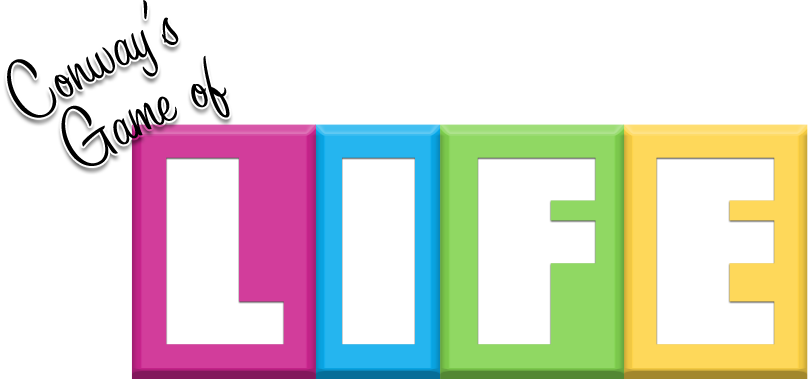
<style>
.page{position:relative;width:808px;height:379px;background:#ffffff}
.page>*{position:absolute;margin:0}
.t1{font:87px "SignPainter-HouseCasual";color:#000000}
.t2{font:229.5px "CompactaBT-Black";color:#ffffff}
</style>
<div class="page">
<p class="t1" style="left:7px;top:0px;width:172px;height:118px">Conway’s</p>
<p class="t1" style="left:61px;top:55px;width:169px;height:111px">Game of</p>
<p class="t2" style="left:166px;top:157px;width:609px;height:188px">LIFE</p>
</div>
